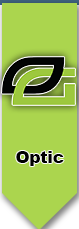
<style>
.page{position:relative;width:79px;height:229px;background:#abd54e}
.page>*{position:absolute;margin:0}
.t1{font:16.7px "Arial-Black";letter-spacing:-0.01em;color:#000000}
</style>
<div class="page">
<p class="t1" style="left:16px;top:151px;width:48px;height:15px">Optic</p>
</div>
